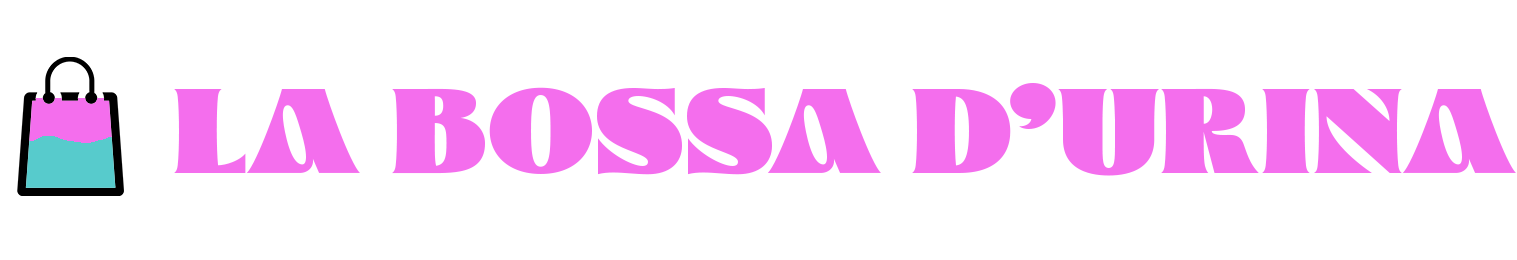
<style>
.page{position:relative;width:1517px;height:260px;background:#ffffff}
.page>*{position:absolute;margin:0}
.t1{font:120px "Glodok-Display";color:#f46eed}
</style>
<div class="page">
<p class="t1" style="left:174px;top:83px;width:1342px;height:93px">LA BOSSA D’URINA</p>
</div>
